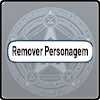
<style>
.page{position:relative;width:100px;height:100px}
.page>*{position:absolute;margin:0}
.t1{font:14px "Barlow-Bold";color:#000000;scale:0.56 1}
</style>
<div class="page">
<p class="t1" style="left:12px;top:46px;width:76px;height:13px">Remover Personagem</p>
</div>
